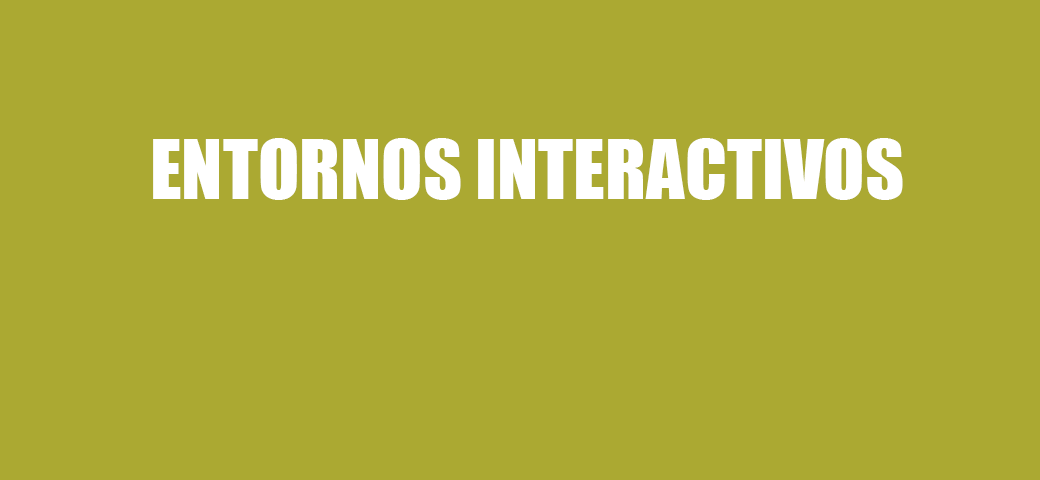
<style>
.page{position:relative;width:1040px;height:480px;background:#aba932}
.page>*{position:absolute;margin:0}
.t1{font:76px "Impact";color:#ffffff}
</style>
<div class="page">
<p class="t1" style="left:153px;top:138px;width:750px;height:62px">ENTORNOS INTERACTIVOS</p>
</div>
